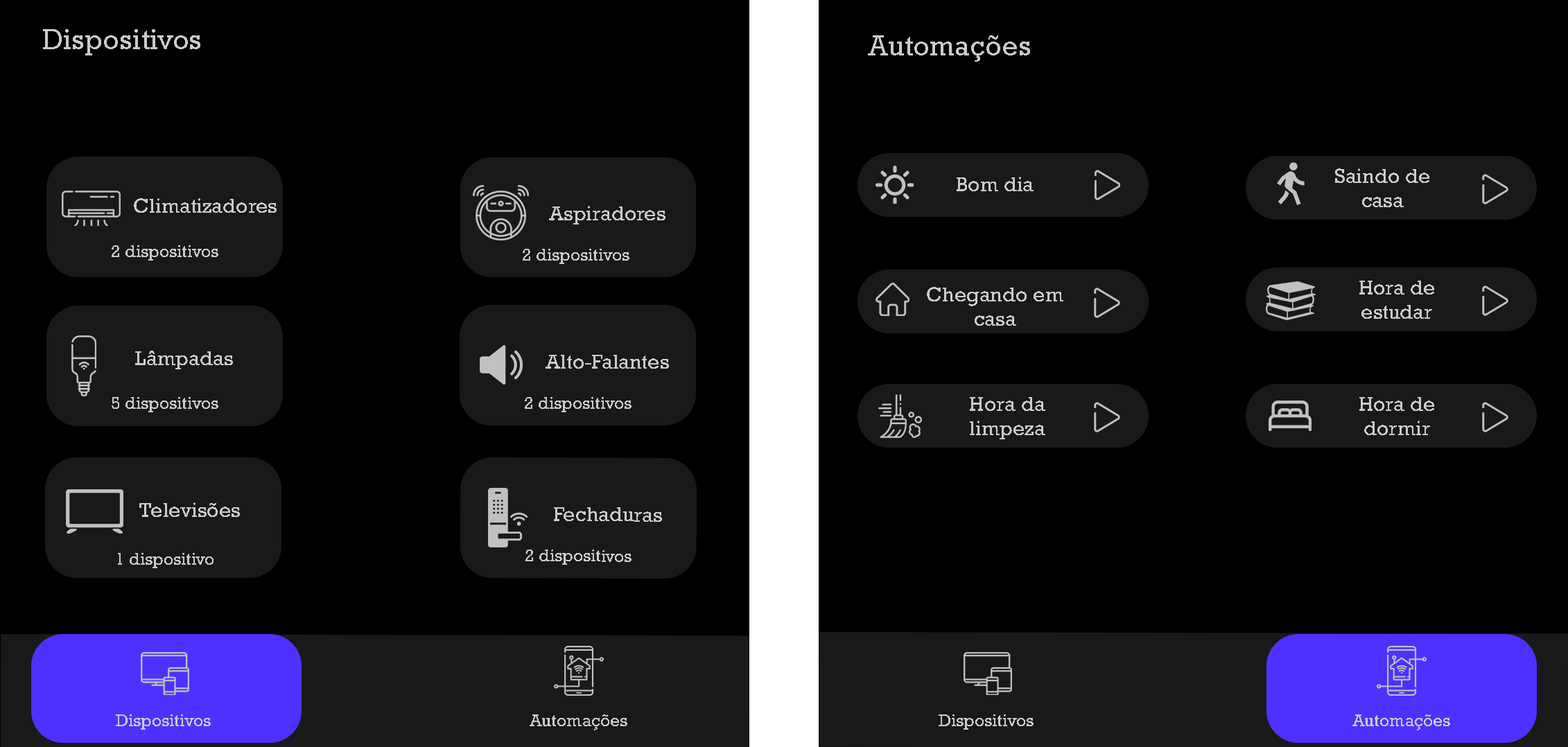
<style>
.page{position:relative;width:1568px;height:747px;background:#000000}
.page>*{position:absolute;margin:0}
.t1{font:28.9px "Rockwell";color:#cbcbcb}
.t2{font:20.5px "Rockwell";color:#cbcbcb}
.t3{font:20.6px "Rockwell";color:#cbcbcb}
.t4{font:17.3px "Rockwell";color:#cbcbcb}
</style>
<div class="page">
<p class="t1" style="left:43px;top:29px;width:157px;height:26px">Dispositivos</p>
<p class="t1" style="left:868px;top:35px;width:162px;height:27px">Automações</p>
<p class="t2" style="left:1335px;top:168px;width:94px;height:39px;text-align:center">Saindo de <br>casa</p>
<p class="t3" style="left:957px;top:177px;width:77px;height:14px">Bom dia</p>
<p class="t3" style="left:134px;top:198px;width:143px;height:15px">Climatizadores</p>
<p class="t3" style="left:549px;top:206px;width:116px;height:19px">Aspiradores</p>
<p class="t4" style="left:112px;top:245px;width:106px;height:16px">2 dispositivos</p>
<p class="t4" style="left:523px;top:249px;width:106px;height:15px">2 dispositivos</p>
<p class="t2" style="left:1359px;top:281px;width:75px;height:38px;text-align:center">Hora de <br>estudar</p>
<p class="t2" style="left:927px;top:287px;width:136px;height:39px;text-align:center">Chegando em<br>casa</p>
<p class="t3" style="left:135px;top:351px;width:98px;height:18px">Lâmpadas</p>
<p class="t3" style="left:546px;top:355px;width:123px;height:14px">Alto-Falantes</p>
<p class="t4" style="left:112px;top:397px;width:106px;height:15px">5 dispositivos</p>
<p class="t4" style="left:525px;top:397px;width:106px;height:15px">2 dispositivos</p>
<p class="t2" style="left:970px;top:397px;width:75px;height:42px;text-align:center">Hora da <br>limpeza</p>
<p class="t2" style="left:1359px;top:397px;width:75px;height:38px;text-align:center">Hora de <br>dormir</p>
<p class="t3" style="left:139px;top:503px;width:101px;height:14px">Televisões</p>
<p class="t2" style="left:554px;top:507px;width:108px;height:15px">Fechaduras</p>
<p class="t4" style="left:118px;top:553px;width:96px;height:15px">1 dispositivo</p>
<p class="t4" style="left:525px;top:550px;width:106px;height:15px">2 dispositivos</p>
<p class="t4" style="left:116px;top:715px;width:95px;height:15px">Dispositivos</p>
<p class="t4" style="left:530px;top:715px;width:97px;height:16px">Automações</p>
<p class="t4" style="left:939px;top:715px;width:95px;height:15px">Dispositivos</p>
<p class="t4" style="left:1352px;top:715px;width:98px;height:16px">Automações</p>
</div>
